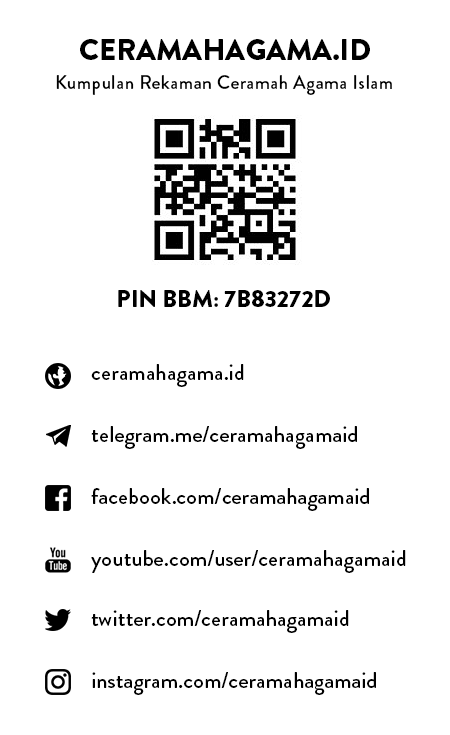
<style>
.page{position:relative;width:450px;height:735px;background:#ffffff}
.page>*{position:absolute;margin:0}
.t1{font:30px "BrandonGrotesque-Black";color:#000000;text-transform:uppercase}
.t2{font:19px "BrandonGrotesque-Medium";letter-spacing:0.025em;color:#000000}
.t3{font:24px "BrandonGrotesque-Black";color:#000000;text-transform:uppercase}
.t4{font:22.7px "BrandonGrotesque-Medium";color:#000000}
</style>
<div class="page">
<p class="t1" style="left:80px;top:39px;width:290px;height:21px">ceramahagama.id</p>
<p class="t2" style="left:56px;top:75px;width:336px;height:20px">Kumpulan Rekaman Ceramah Agama Islam</p>
<p class="t3" style="left:118px;top:290px;width:212px;height:17px">pin bbm: 7b83272d</p>
<p class="t4" style="left:91px;top:364px;width:153px;height:23px">ceramahagama.id</p>
<p class="t4" style="left:91px;top:426px;width:266px;height:23px">telegram.me/ceramahagamaid</p>
<p class="t4" style="left:91px;top:488px;width:278px;height:23px">facebook.com/ceramahagamaid</p>
<p class="t4" style="left:91px;top:550px;width:315px;height:23px">youtube.com/user/ceramahagamaid</p>
<p class="t4" style="left:91px;top:610px;width:258px;height:23px">twitter.com/ceramahagamaid</p>
<p class="t4" style="left:92px;top:672px;width:284px;height:23px">instagram.com/ceramahagamaid</p>
</div>
